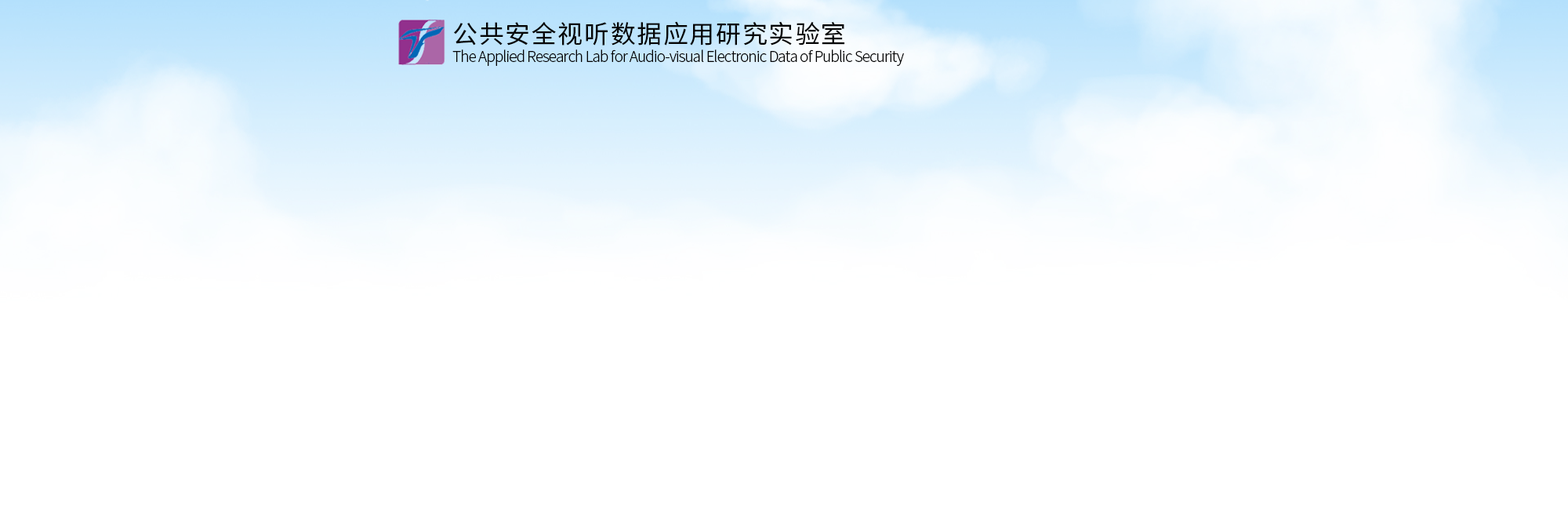
<style>
.page{position:relative;width:1568px;height:517px;background:#ffffff}
.page>*{position:absolute;margin:0}
.t1{font:25.1px "NotoSansHans-Regular";letter-spacing:0.05em;color:#040404}
.t2{font:14.9px "NotoSansHans-Light";letter-spacing:-0.05em;color:#040404}
</style>
<div class="page">
<p class="t1" style="left:454px;top:21px;width:391px;height:24px">公共安全视听数据应用研究实验室</p>
<p class="t2" style="left:452px;top:49px;width:452px;height:17px">The Applied Research Lab for Audio-visual Electronic Data of Public Security</p>
</div>
